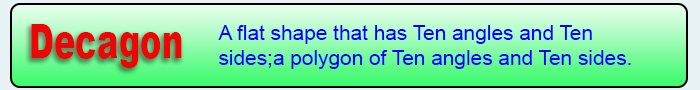
<style>
.page{position:relative;width:700px;height:90px}
.page>*{position:absolute;margin:0}
.t1{font:47.6px "Arial-Black";color:#ec0606;scale:0.68 1}
.t2{font:20.8px "ArialMT";color:#0600ff}
</style>
<div class="page">
<p class="t1" style="left:31px;top:24px;width:151px;height:44px">Decagon</p>
<p class="t2" style="left:218px;top:25px;width:413px;height:44px">A flat shape that has Ten angles and Ten<br>sides;a polygon of Ten angles and Ten sides.</p>
</div>
